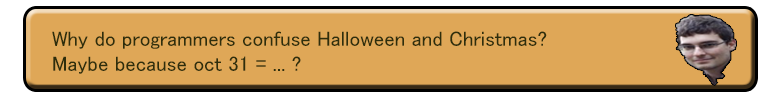
<style>
.page{position:relative;width:770px;height:97px;background:#dfa757}
.page>*{position:absolute;margin:0}
.t1{font:21px "MS-PGothic";color:#2e2e0c}
</style>
<div class="page">
<p class="t1" style="left:52px;top:31px;width:495px;height:43px;text-align:right">Why do programmers confuse Halloween and Christmas? <br>Maybe because oct 31 = ... ?</p>
</div>
